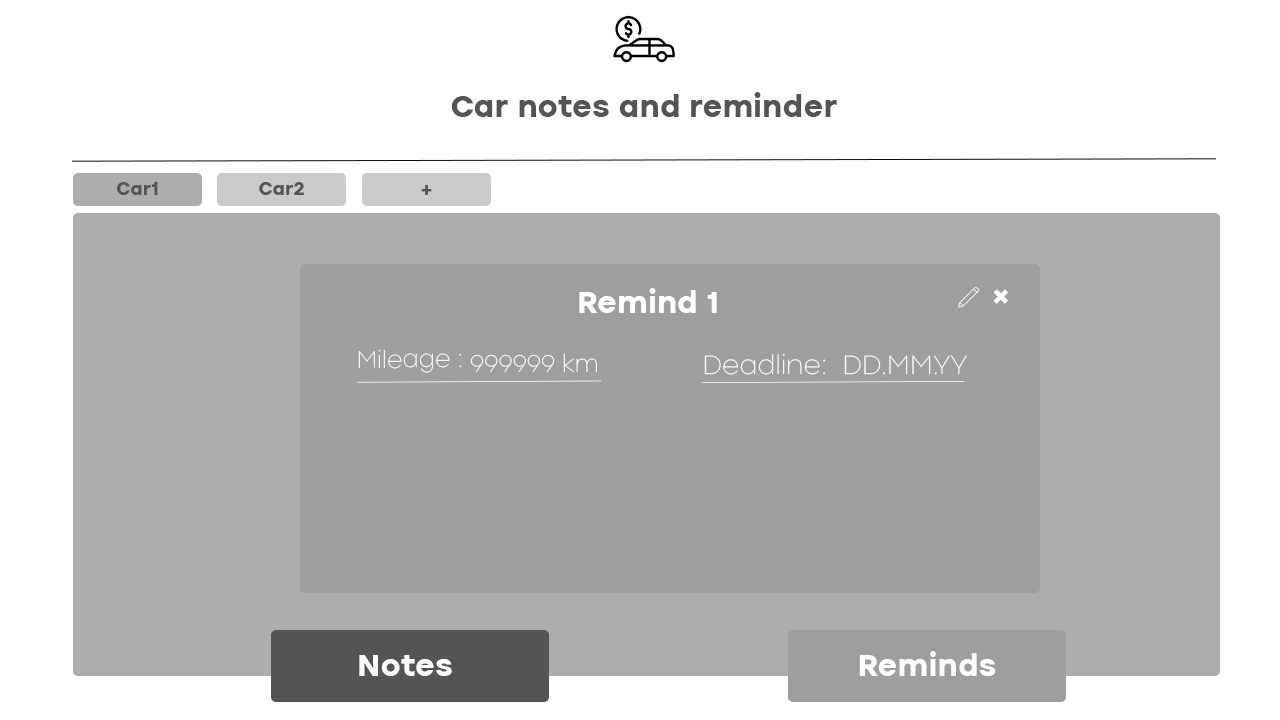
<style>
.page{position:relative;width:1280px;height:720px;background:#ffffff}
.page>*{position:absolute;margin:0}
.t1{font:30px "ICTV-Bold";color:#545454}
.t2{font:18px "ICTV-Bold";color:#545454}
.t3{font:30px "ICTV-Bold";color:#ffffff}
.t4{font:23.7px "ICTV-Thin";color:#ffffff}
.t5{font:26px "ICTV-Thin";color:#ffffff}
</style>
<div class="page">
<p class="t1" style="left:451px;top:92px;width:386px;height:25px">Car notes and reminder</p>
<p class="t2" style="left:117px;top:182px;width:41px;height:13px">Car1</p>
<p class="t2" style="left:259px;top:182px;width:45px;height:13px">Car2</p>
<p class="t2" style="left:421px;top:185px;width:11px;height:10px">+</p>
<p class="t3" style="left:579px;top:288px;width:138px;height:25px">Remind 1</p>
<p class="t3" style="left:993px;top:289px;width:16px;height:15px;rotate:45deg">+</p>
<p class="t4" style="left:358px;top:349px;width:104px;height:24px">Mileage :</p>
<p class="t4" style="left:470px;top:353px;width:127px;height:20px">999999 km</p>
<p class="t5" style="left:704px;top:354px;width:263px;height:21px">Deadline:  DD.MM.YY</p>
<p class="t3" style="left:859px;top:651px;width:137px;height:25px">Reminds</p>
<p class="t3" style="left:359px;top:655px;width:93px;height:21px">Notes</p>
</div>
